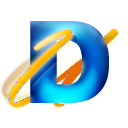
<style>
.page{position:relative;width:128px;height:128px;background:#ffffff}
.page>*{position:absolute;margin:0}
.t1{font:114px "VladimirScript";letter-spacing:0.05em;scale:1.05 1}
.t2{font:114px "Arial-Black";letter-spacing:0.05em;scale:1.05 1}
</style>
<div class="page">
<p class="t1" style="left:8px;top:29px;width:110px;height:78px">U</p>
<p class="t2" style="left:30px;top:21px;width:79px;height:82px">D</p>
</div>
